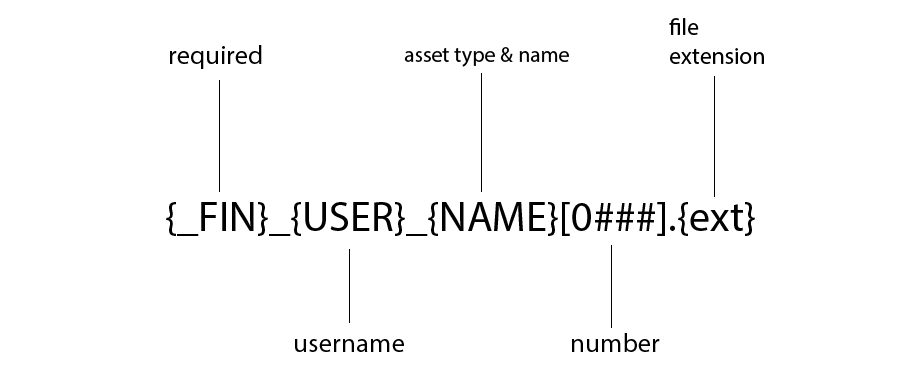
<style>
.page{position:relative;width:919px;height:373px;background:#ffffff}
.page>*{position:absolute;margin:0}
.t1{font:23.5px "MyriadPro-Regular";color:#000000}
.t2{font:26.9px "MyriadPro-Regular";color:#000000}
.t3{font:21.8px "MyriadPro-Regular";color:#000000}
.t4{font:42.3px "MyriadPro-Regular";color:#000000}
</style>
<div class="page">
<p class="t1" style="left:669px;top:18px;width:95px;height:46px">file<br>extension</p>
<p class="t2" style="left:170px;top:45px;width:92px;height:24px">required</p>
<p class="t3" style="left:404px;top:47px;width:165px;height:20px">asset type &amp; name</p>
<p class="t4" style="left:166px;top:202px;width:589px;height:34px">{_FIN}_{USER}_{NAME}[0###].{ext}</p>
<p class="t2" style="left:295px;top:339px;width:109px;height:13px">username</p>
<p class="t2" style="left:572px;top:333px;width:88px;height:19px">number</p>
</div>
